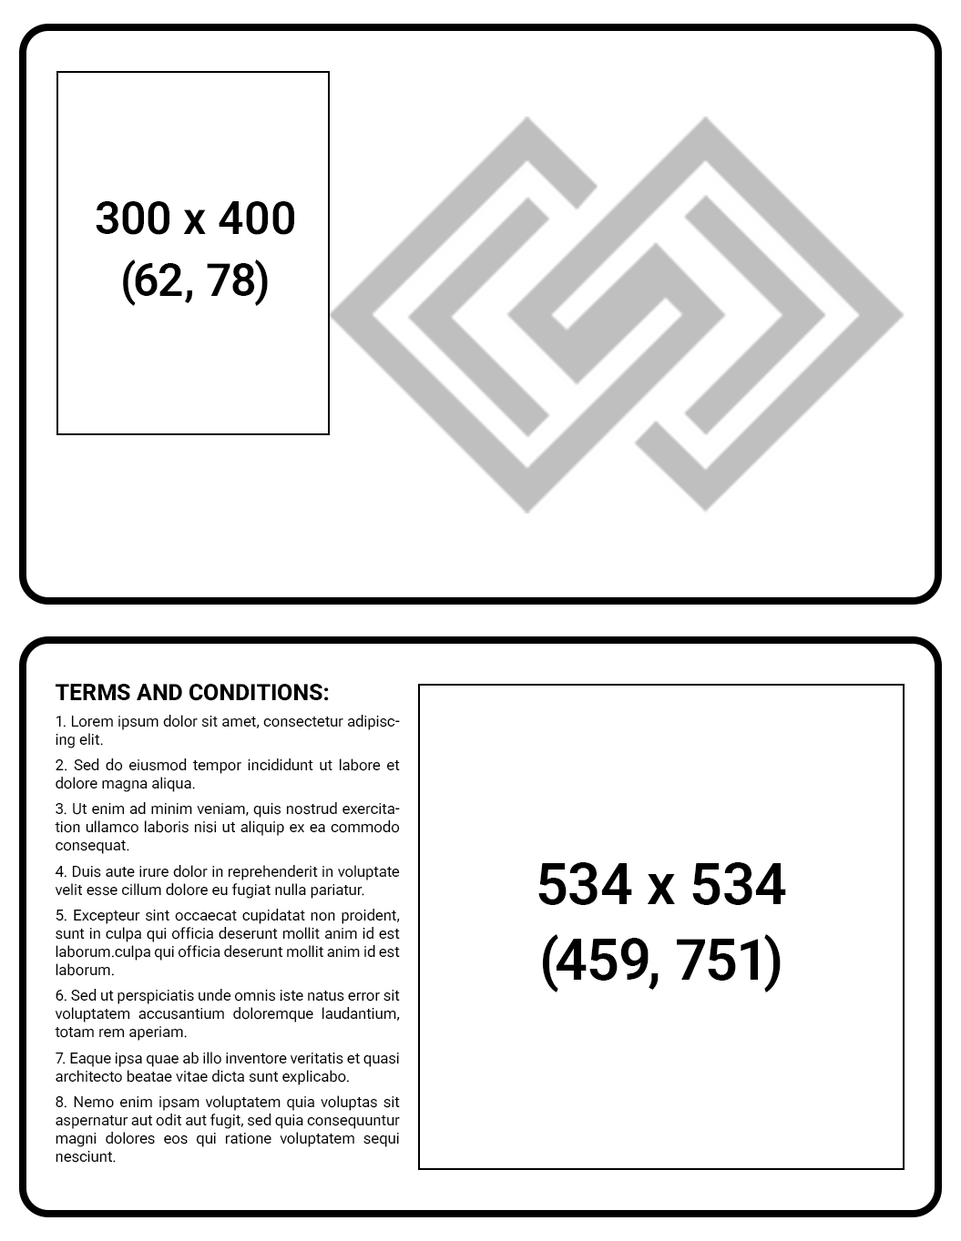
<style>
.page{position:relative;width:961px;height:1241px;background:#ffffff}
.page>*{position:absolute;margin:0}
.t1{font:45.5px "Roboto-SemiBold";color:#000000}
.t2{font:15.2px "Roboto-Regular";color:#000000}
.t3{font:22.8px "Roboto-ExtraBold";color:#000000}
.t4{font:56.9px "Roboto-SemiBold";color:#000000}
</style>
<div class="page">
<p class="t1" style="left:96px;top:201px;width:198px;height:105px;text-align:center">300 x 400<br>(62, 78)</p>
<p class="t2" style="left:55px;top:684px;width:345px;height:479px;text-align:justify"><span class="t3">TERMS AND CONDITIONS:<br></span>1. Lorem ipsum dolor sit amet, consectetur adipiscing elit.<br>2. Sed do eiusmod tempor incididunt ut labore et dolore magna aliqua.<br>3. Ut enim ad minim veniam, quis nostrud exercitation ullamco laboris nisi ut aliquip ex ea commodo consequat.<br>4. Duis aute irure dolor in reprehenderit in voluptate velit esse cillum dolore eu fugiat nulla pariatur.<br>5. Excepteur sint occaecat cupidatat non proident, sunt in culpa qui officia deserunt mollit anim id est laborum.culpa qui officia deserunt mollit anim id est laborum.<br>6. Sed ut perspiciatis unde omnis iste natus error sit voluptatem accusantium doloremque laudantium, totam rem aperiam.<br>7. Eaque ipsa quae ab illo inventore veritatis et quasi architecto beatae vitae dicta sunt explicabo.<br>8. Nemo enim ipsam voluptatem quia voluptas sit aspernatur aut odit aut fugit, sed quia consequuntur magni dolores eos qui ratione voluptatem sequi nesciunt.</p>
<p class="t4" style="left:538px;top:862px;width:248px;height:131px;text-align:center">534 x 534<br>(459, 751)</p>
</div>
